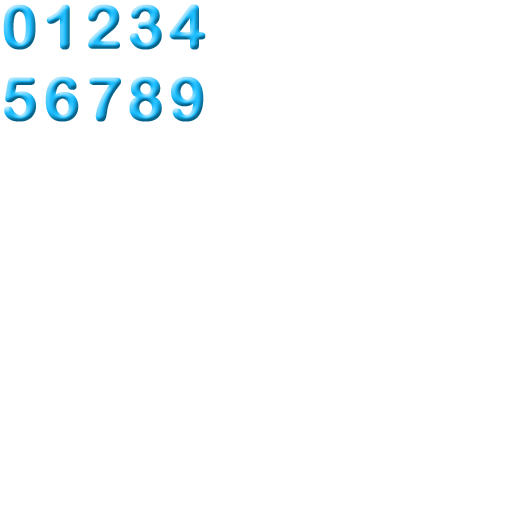
<style>
.page{position:relative;width:512px;height:512px;background:#ffffff}
.page>*{position:absolute;margin:0}
.t1{font:60px "ArialRoundedMTBold";letter-spacing:-0.1em;font-weight:bold}
</style>
<div class="page">
<p class="t1" style="left:3px;top:4px;width:203px;height:118px">0 1 2 3 4<br>5 6 7 8 9</p>
</div>
